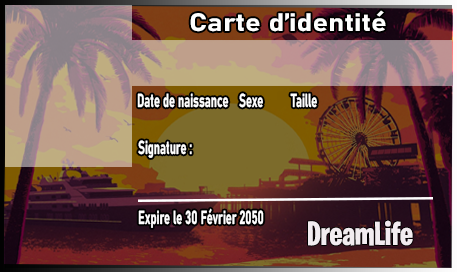
<style>
.page{position:relative;width:457px;height:272px}
.page>*{position:absolute;margin:0}
.t1{font:25px "Bahnschrift-Bold";color:#ffffff;scale:1.18 1}
.t2{font:18.7px "Bahnschrift-Bold";color:#ffffff;scale:0.6 1}
.t3{font:33.3px "BurbankBigCondensed-Bold";color:#f2ecf0}
</style>
<div class="page">
<p class="t1" style="left:190px;top:10px;width:196px;height:22px">Carte d’identité</p>
<p class="t2" style="left:137px;top:93px;width:92px;height:15px">Date de naissance</p>
<p class="t2" style="left:239px;top:93px;width:24px;height:15px">Sexe</p>
<p class="t2" style="left:290px;top:93px;width:27px;height:15px">Taille</p>
<p class="t2" style="left:138px;top:140px;width:54px;height:18px">Signature :</p>
<p class="t2" style="left:138px;top:208px;width:126px;height:20px">Expire le 30 Février 2050</p>
<p class="t3" style="left:308px;top:220px;width:105px;height:26px">DreamLife</p>
</div>
